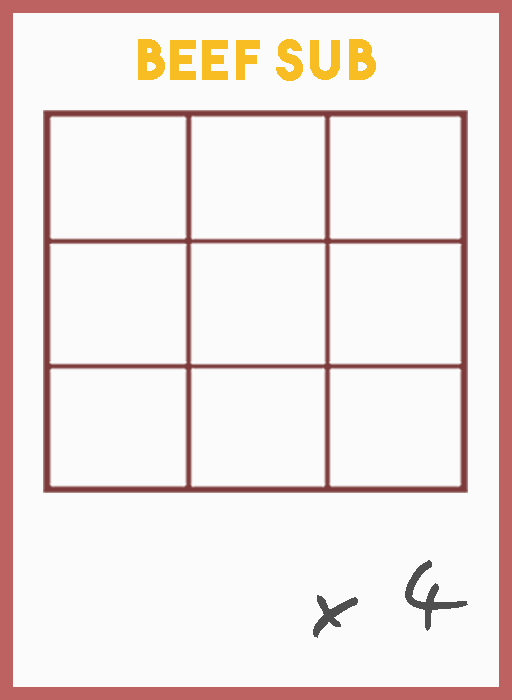
<style>
.page{position:relative;width:512px;height:700px;background:#fbfbfb}
.page>*{position:absolute;margin:0}
.t1{font:54.5px "TheBoldFont";letter-spacing:0.05em;color:#f7bd22}
.t2{font:106.1px "EasySpeech";letter-spacing:0.05em;color:#4f4f4f}
</style>
<div class="page">
<p class="t1" style="left:138px;top:39px;width:238px;height:42px">beef sub</p>
<p class="t2" style="left:313px;top:560px;width:155px;height:78px">x 4</p>
</div>
